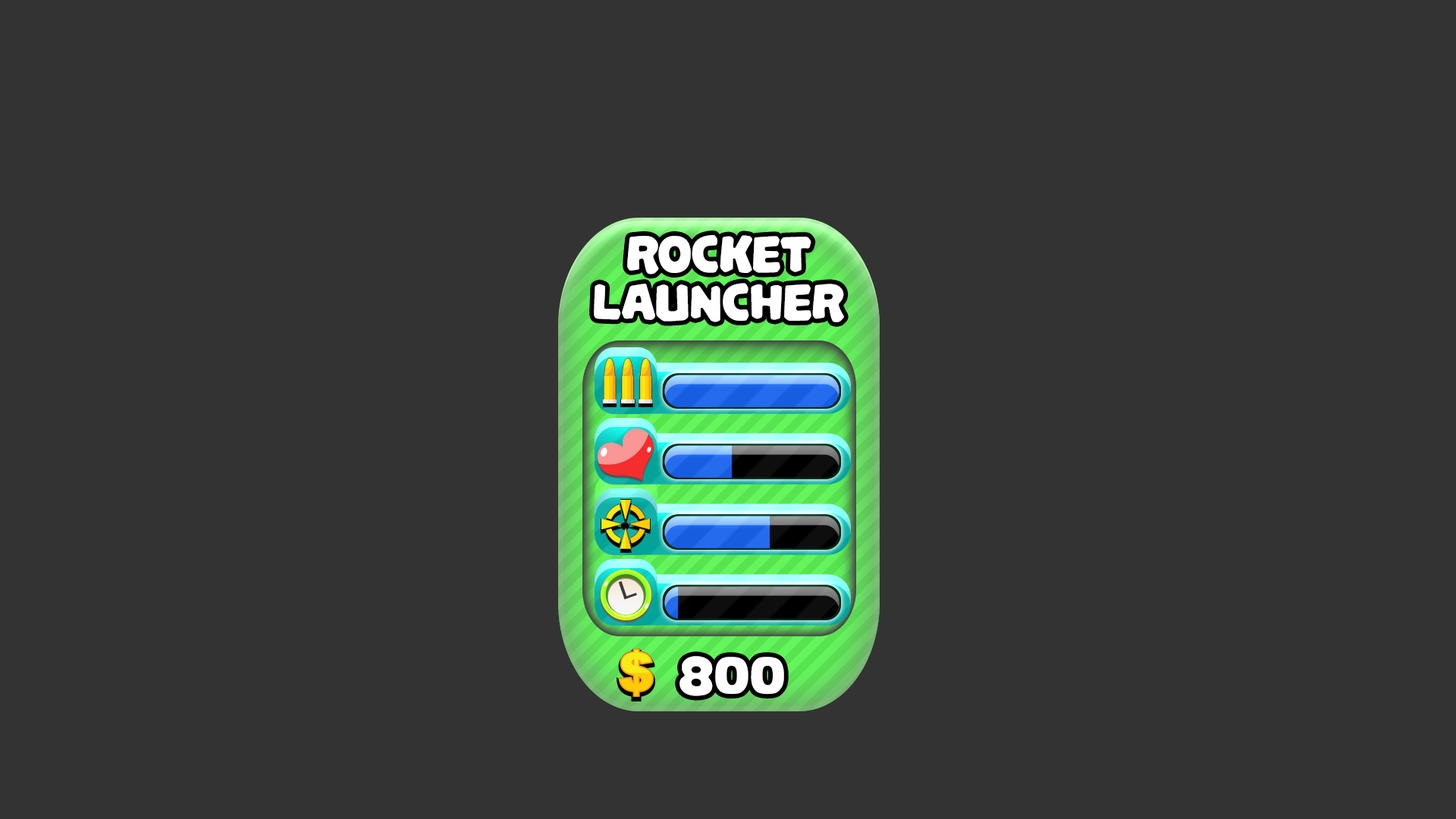
<style>
.page{position:relative;width:1456px;height:819px;background:#333333}
.page>*{position:absolute;margin:0}
.t1{font:54.9px/48.1px "PalameciaTitling-Regular";letter-spacing:-0.02em;color:#ffffff}
.t2{font:61.8px "PalameciaTitling-Regular";letter-spacing:-0.02em;color:#ffffff}
</style>
<div class="page">
<p class="t1" style="left:594px;top:235px;width:250px;height:87px;text-align:center">Rocket<br>Launcher</p>
<p class="t2" style="left:679px;top:656px;width:105px;height:40px">800</p>
</div>
